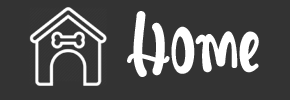
<style>
.page{position:relative;width:290px;height:100px;background:#333333}
.page>*{position:absolute;margin:0}
.t1{font:54.5px "SweetUnicorn";color:#ffffff}
</style>
<div class="page">
<p class="t1" style="left:127px;top:11px;width:132px;height:66px">Home</p>
</div>
